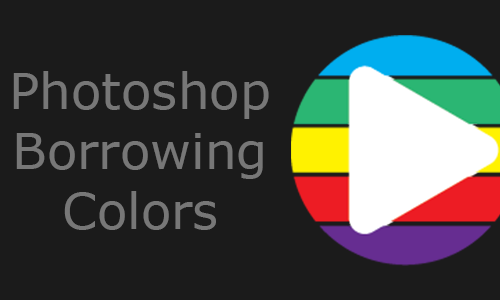
<style>
.page{position:relative;width:500px;height:300px;background:#1b1b1b}
.page>*{position:absolute;margin:0}
.t1{font:50px "Verdana";color:#777777}
</style>
<div class="page">
<p class="t1" style="left:13px;top:71px;width:256px;height:159px;text-align:center">Photoshop<br>Borrowing<br>Colors</p>
</div>
